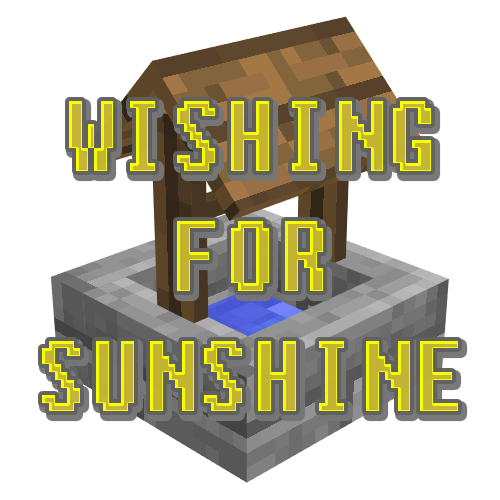
<style>
.page{position:relative;width:500px;height:500px;background:#ffffff}
.page>*{position:absolute;margin:0}
.t1{font:100px "Fixedsys";letter-spacing:0.05em;color:#c5b531;scale:0.8 1}
</style>
<div class="page">
<p class="t1" style="left:42px;top:101px;width:416px;height:310px;text-align:center">WISHING<br>FOR<br>SUNSHINE</p>
</div>
